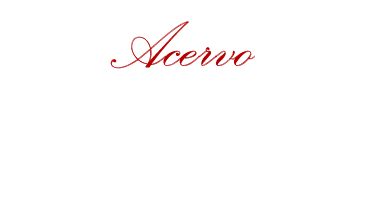
<style>
.page{position:relative;width:377px;height:202px;background:#ffffff}
.page>*{position:absolute;margin:0}
.t1{font:84px "PalaceScriptMT";color:#b30000}
</style>
<div class="page">
<p class="t1" style="left:110px;top:21px;width:145px;height:47px">Acervo</p>
<p class="t1" style="left:111px;top:21px;width:144px;height:48px">Acervo</p>
</div>
